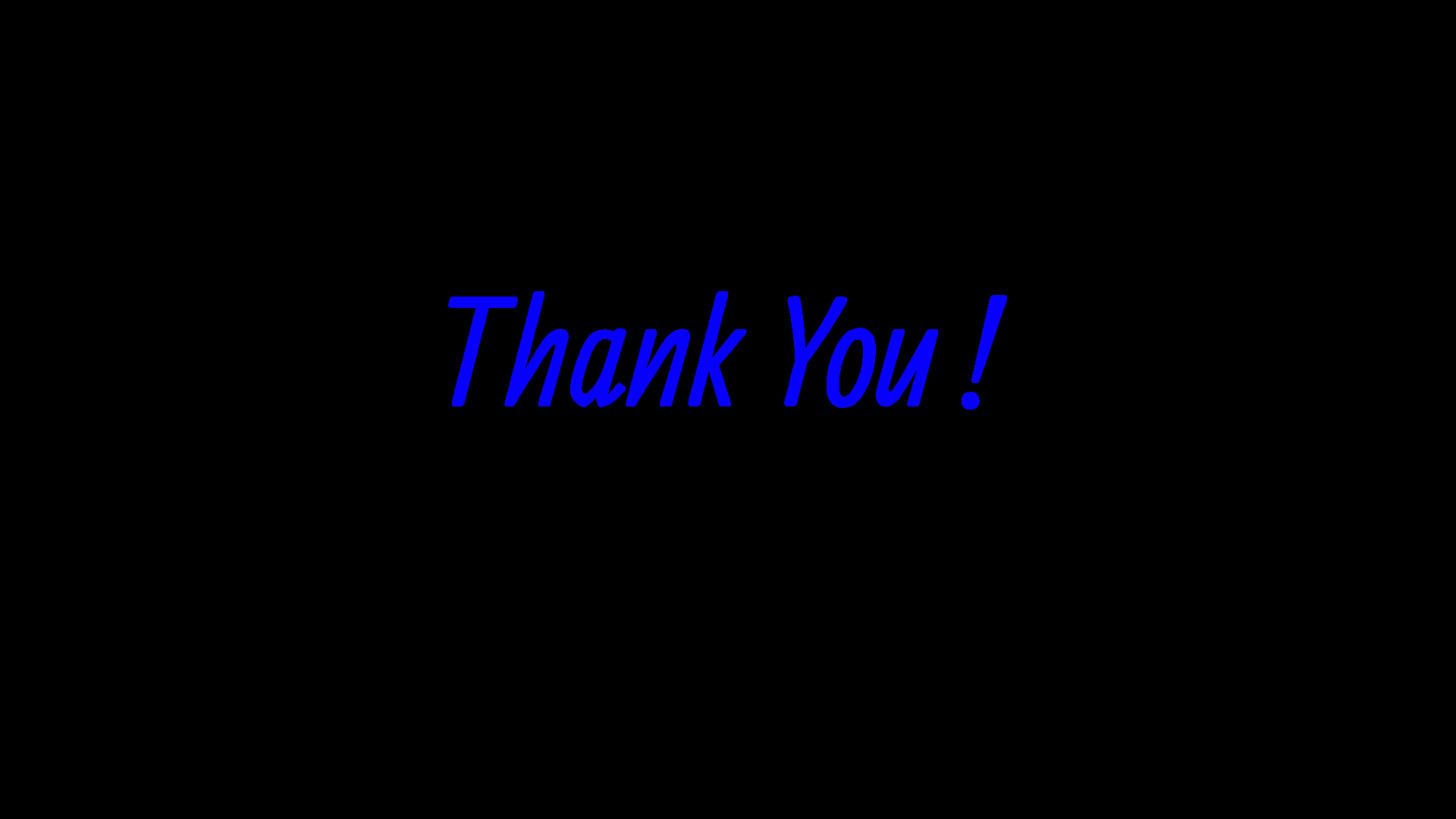
<style>
.page{position:relative;width:1456px;height:819px;background:#000000}
.page>*{position:absolute;margin:0}
.t1{font:151.7px "Allan-Regular";color:#0800ff}
</style>
<div class="page">
<p class="t1" style="left:447px;top:291px;width:562px;height:118px">Thank You !</p>
</div>
